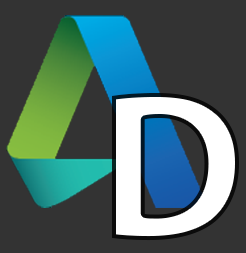
<style>
.page{position:relative;width:246px;height:253px;background:#333333}
.page>*{position:absolute;margin:0}
.t1{font:213.3px "MyriadPro-Bold";color:#ffffff}
</style>
<div class="page">
<p class="t1" style="left:112px;top:93px;width:127px;height:148px">D</p>
</div>
